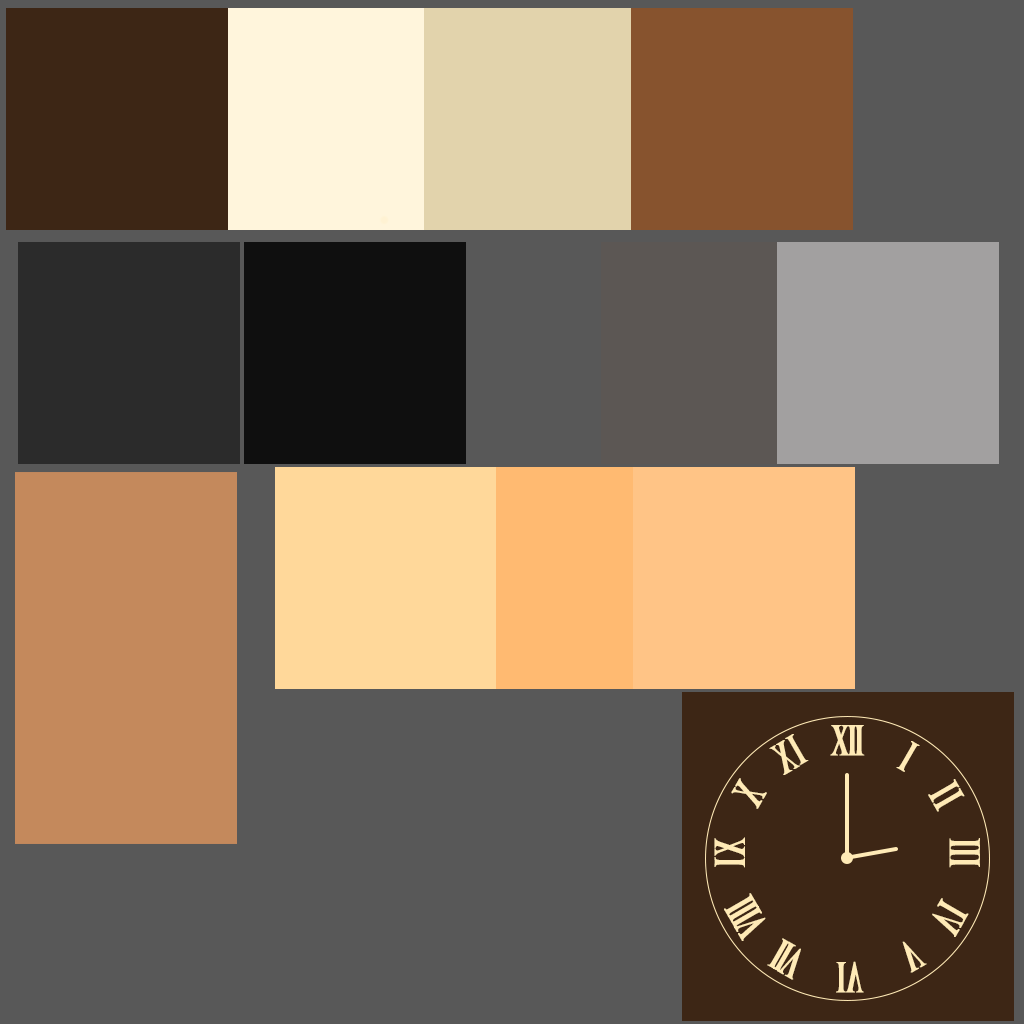
<style>
.page{position:relative;width:1024px;height:1024px;background:#585858}
.page>*{position:absolute;margin:0}
.t1{font:40px "MapRoman-Compressed";letter-spacing:-0.08em;color:#ffeab6;font-weight:bold}
.t2{font:39.9px "MapRoman-Compressed";color:#ffeab6;font-weight:bold}
.t3{font:40px "MapRoman-Compressed";color:#ffeab6;font-weight:bold}
.t4{font:39.8px "MapRoman-Compressed";color:#ffeab6;font-weight:bold}
.t5{font:39.8px "MapRoman-Compressed";letter-spacing:-0.02em;color:#ffeab6;font-weight:bold}
.t6{font:40px "MapRoman-Compressed";letter-spacing:-0.085em;color:#ffeab6;font-weight:bold}
.t7{font:40.1px "MapRoman-Compressed";color:#ffeab6;font-weight:bold}
.t8{font:40.1px "MapRoman-Compressed";letter-spacing:-0.1em;color:#ffeab6;font-weight:bold}
.t9{font:40.2px "MapRoman-Compressed";color:#ffeab6;font-weight:bold}
</style>
<div class="page">
<p class="t1" style="left:830px;top:725px;width:35px;height:31px">xii</p>
<p class="t2" style="left:769px;top:734px;width:40px;height:41px;rotate:150deg">ix</p>
<p class="t3" style="left:896px;top:741px;width:24px;height:31px;rotate:30deg">i</p>
<p class="t2" style="left:731px;top:778px;width:36px;height:31px;rotate:120deg">x</p>
<p class="t3" style="left:928px;top:779px;width:37px;height:33px;rotate:60deg">ii</p>
<p class="t4" style="left:714px;top:837px;width:31px;height:31px;rotate:90deg">xi</p>
<p class="t5" style="left:949px;top:838px;width:31px;height:30px;rotate:90deg">iii</p>
<p class="t6" style="left:724px;top:893px;width:42px;height:48px;rotate:-120deg">viii</p>
<p class="t7" style="left:932px;top:898px;width:37px;height:39px;rotate:-60deg">vi</p>
<p class="t8" style="left:767px;top:938px;width:34px;height:42px;rotate:-150deg">vii</p>
<p class="t9" style="left:902px;top:941px;width:25px;height:32px;rotate:-30deg">v</p>
<p class="t2" style="left:836px;top:961px;width:28px;height:32px">iv</p>
</div>
